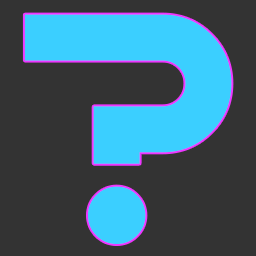
<style>
.page{position:relative;width:256px;height:256px;background:#333333}
.page>*{position:absolute;margin:0}
.t1{font:366.9px "GameOfSquids";color:#3bcfff}
</style>
<div class="page">
<p class="t1" style="left:24px;top:14px;width:208px;height:230px">?</p>
</div>
